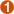
<style>
.page{position:relative;width:14px;height:14px;background:#cd4d07}
.page>*{position:absolute;margin:0}
.t1{font:13.4px "HelveticaNeue-Medium";color:#ffffff}
</style>
<div class="page">
<p class="t1" style="left:4px;top:2px;width:5px;height:10px">1</p>
</div>
